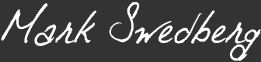
<style>
.page{position:relative;width:261px;height:62px;background:#333333}
.page>*{position:absolute;margin:0}
.t1{font:80px "Otto";letter-spacing:0.005em;color:#ffffff}
</style>
<div class="page">
<p class="t1" style="left:1px;top:2px;width:260px;height:59px">Mark Swedberg</p>
</div>
